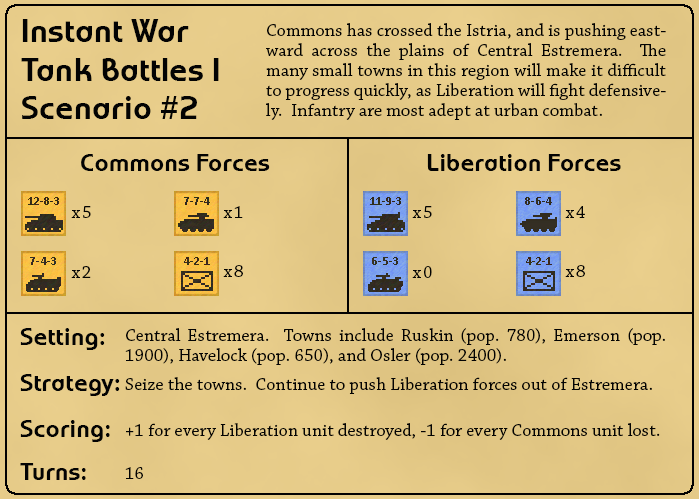
<style>
.page{position:relative;width:699px;height:499px}
.page>*{position:absolute;margin:0}
.t1{font:32px "WorldofWater-Regular";letter-spacing:0.01em;color:#030303}
.t2{font:18px/20px "ChaparralPro-Regular";letter-spacing:0.01em;color:#030303}
.t3{font:24px "WorldofWater-Regular";letter-spacing:0.01em;color:#030303}
.t4{font:18px "ChaparralPro-Regular";letter-spacing:0.1em;color:#030303}
.t5{font:18px "ChaparralPro-Regular";letter-spacing:0.01em;color:#030303}
</style>
<div class="page">
<p class="t1" style="left:21px;top:19px;width:198px;height:100px">Instant War<br>Tank Battles I<br>Scenario #2</p>
<p class="t2" style="left:266px;top:23px;width:400px;height:97px;text-align:justify">Commons has crossed the Istria, and is pushing eastward across the plains of Central Estremera.  The many small towns in this region will make it difficult to progress quickly, as Liberation will fight defensively.  Infantry are most adept at urban combat.</p>
<p class="t3" style="left:81px;top:154px;width:189px;height:17px">Commons Forces</p>
<p class="t3" style="left:427px;top:154px;width:194px;height:17px">Liberation Forces</p>
<p class="t4" style="left:71px;top:206px;width:20px;height:12px">x5</p>
<p class="t4" style="left:223px;top:206px;width:20px;height:12px">x1</p>
<p class="t4" style="left:412px;top:206px;width:20px;height:12px">x5</p>
<p class="t4" style="left:565px;top:206px;width:20px;height:12px">x4</p>
<p class="t4" style="left:71px;top:266px;width:20px;height:12px">x2</p>
<p class="t4" style="left:223px;top:265px;width:20px;height:12px">x8</p>
<p class="t4" style="left:412px;top:266px;width:20px;height:12px">x0</p>
<p class="t4" style="left:565px;top:265px;width:20px;height:12px">x8</p>
<p class="t3" style="left:20px;top:328px;width:85px;height:22px">Setting:</p>
<p class="t2" style="left:125px;top:328px;width:540px;height:37px;text-align:justify">Central Estremera.  Towns include Ruskin (pop. 780), Emerson (pop. 1900), Havelock (pop. 650), and Osler (pop. 2400).</p>
<p class="t3" style="left:20px;top:374px;width:100px;height:22px">Strategy:</p>
<p class="t5" style="left:125px;top:377px;width:527px;height:17px">Seize the towns.  Continue to push Liberation forces out of Estremera.</p>
<p class="t3" style="left:20px;top:420px;width:90px;height:22px">Scoring:</p>
<p class="t5" style="left:126px;top:423px;width:534px;height:17px">+1 for every Liberation unit destroyed, -1 for every Commons unit lost.</p>
<p class="t3" style="left:20px;top:463px;width:66px;height:17px">Turns:</p>
<p class="t5" style="left:125px;top:467px;width:18px;height:12px">16</p>
</div>
